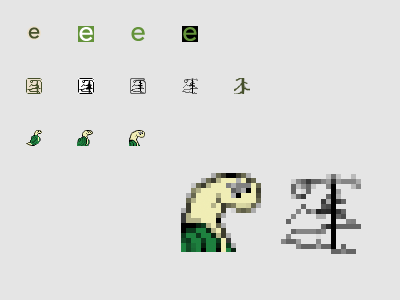
<style>
.page{position:relative;width:400px;height:300px;background:#e5e5e5}
.page>*{position:absolute;margin:0}
.t1{font:28px "AvenirLTStd-Roman";color:#64933a}
</style>
<div class="page">
<p class="t1" style="left:131px;top:27px;width:14px;height:14px">e</p>
<p class="t1" style="left:183px;top:27px;width:14px;height:14px">e</p>
</div>
